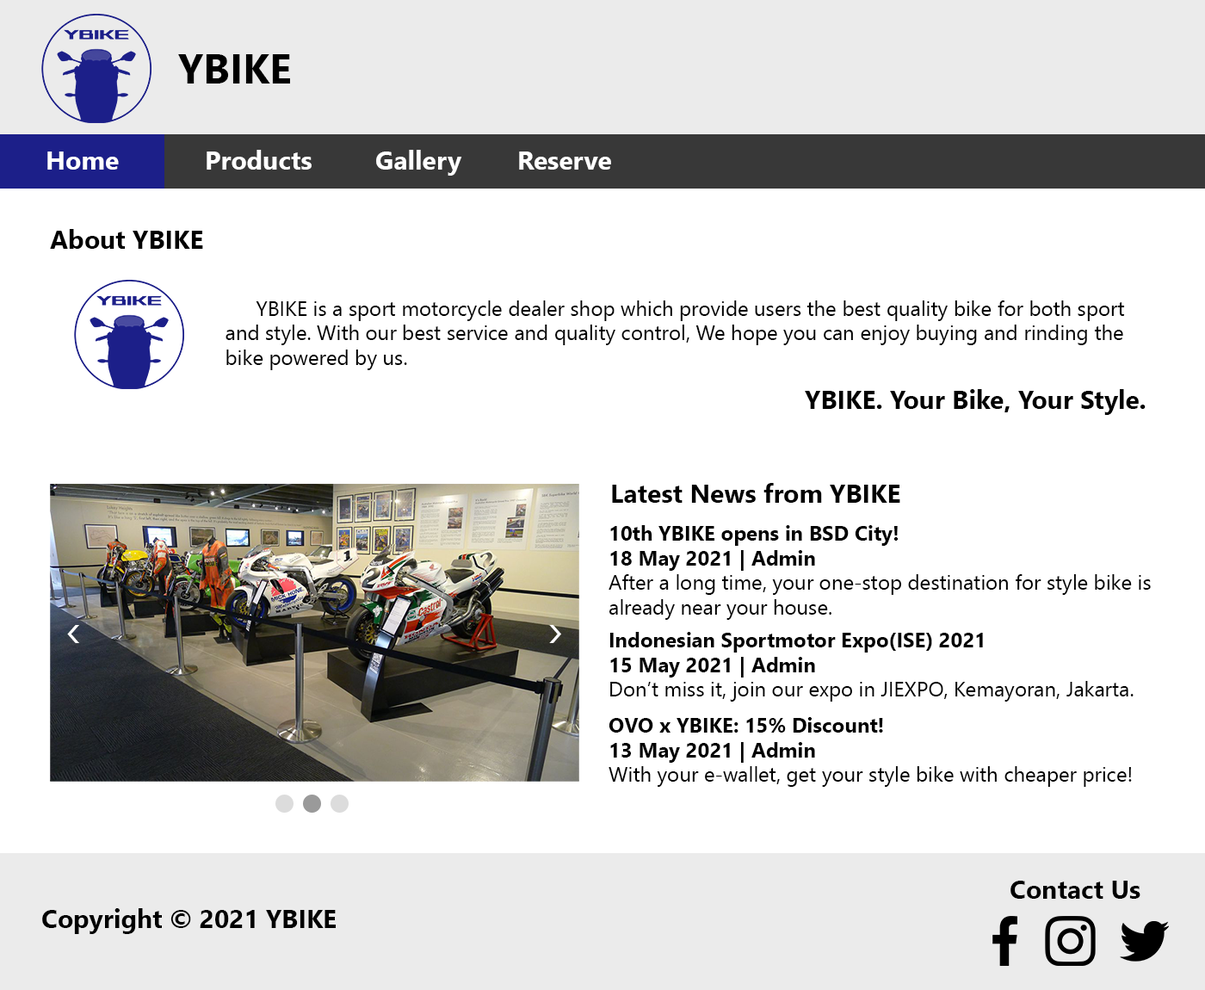
<style>
.page{position:relative;width:1205px;height:990px;background:#ffffff}
.page>*{position:absolute;margin:0}
.t1{font:41.3px "SegoeUI-Bold";color:#000000}
.t2{font:25.8px "SegoeUI-Bold";color:#ffffff}
.t3{font:25.8px "SegoeUI-Bold";color:#000000}
.t4{font:20.7px "SegoeUI";color:#000000}
.t5{font:20.7px "SegoeUI-Bold";color:#000000}
.t6{font:25.8px "ROGFonts-Regular";color:#ffffff}
</style>
<div class="page">
<p class="t1" style="left:178px;top:54px;width:112px;height:29px">YBIKE</p>
<p class="t2" style="left:207px;top:150px;width:105px;height:20px">Products</p>
<p class="t2" style="left:376px;top:150px;width:86px;height:26px">Gallery</p>
<p class="t2" style="left:47px;top:151px;width:72px;height:19px">Home</p>
<p class="t2" style="left:519px;top:151px;width:92px;height:19px">Reserve</p>
<p class="t3" style="left:50px;top:229px;width:153px;height:20px">About YBIKE</p>
<p class="t4" style="left:225px;top:300px;width:900px;height:70px">YBIKE is a sport motorcycle dealer shop which provide users the best quality bike for both sport<br>and style. With our best service and quality control, We hope you can enjoy buying and rinding the <br>bike powered by us.</p>
<p class="t3" style="left:805px;top:389px;width:340px;height:26px">YBIKE. Your Bike, Your Style.</p>
<p class="t3" style="left:612px;top:483px;width:288px;height:20px">Latest News from YBIKE</p>
<p class="t4" style="left:608px;top:525px;width:543px;height:95px"><span class="t5">10th YBIKE opens in BSD City!<br>18 May 2021 | Admin<br></span>After a long time, your one-stop destination for style bike is<br>already near your house.</p>
<p class="t6" style="left:67px;top:625px;width:12px;height:18px">&lt;</p>
<p class="t6" style="left:549px;top:625px;width:12px;height:18px;rotate:180deg">&lt;</p>
<p class="t4" style="left:609px;top:632px;width:524px;height:69px"><span class="t5">Indonesian Sportmotor Expo(ISE) 2021<br>15 May 2021 | Admin<br></span>Don’t miss it, join our expo in JIEXPO, Kemayoran, Jakarta.</p>
<p class="t4" style="left:608px;top:717px;width:524px;height:70px"><span class="t5">OVO x YBIKE: 15% Discount!<br>13 May 2021 | Admin<br></span>With your e-wallet, get your style bike with cheaper price!</p>
<p class="t3" style="left:1010px;top:880px;width:130px;height:18px">Contact Us</p>
<p class="t3" style="left:42px;top:908px;width:294px;height:26px">Copyright © 2021 YBIKE</p>
</div>
